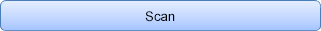
<style>
.page{position:relative;width:321px;height:31px}
.page>*{position:absolute;margin:0}
.t1{font:13.3px "ArialMT";color:#010101}
</style>
<div class="page">
<p class="t1" style="left:145px;top:11px;width:30px;height:11px">Scan</p>
</div>
